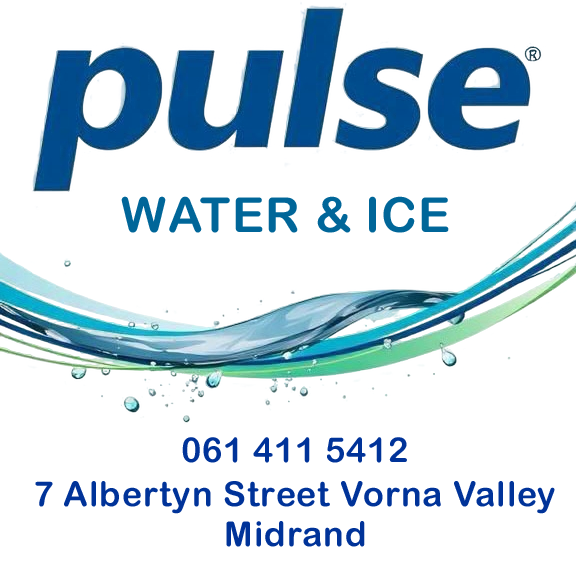
<style>
.page{position:relative;width:576px;height:564px;background:#ffffff}
.page>*{position:absolute;margin:0}
.t1{font:48.1px "ArialRoundedMTBold";letter-spacing:0.025em;color:#006699}
.t2{font:34.3px "ArialRoundedMTBold";letter-spacing:0.025em;color:#003399}
</style>
<div class="page">
<p class="t1" style="left:121px;top:196px;width:328px;height:37px">WATER &amp; ICE</p>
<p class="t2" style="left:182px;top:437px;width:225px;height:26px">061 411 5412</p>
<p class="t2" style="left:35px;top:481px;width:520px;height:33px">7 Albertyn Street Vorna Valley</p>
<p class="t2" style="left:226px;top:521px;width:139px;height:26px">Midrand</p>
</div>
